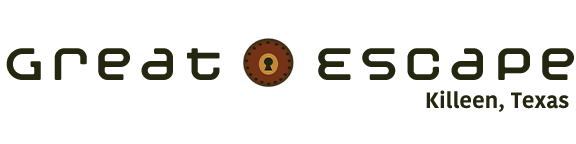
<style>
.page{position:relative;width:576px;height:144px;background:#ffffff}
.page>*{position:absolute;margin:0}
.t1{font:48px "Moby-Monospace";color:#24260f}
.t2{font:22px "KohinoorBangla-Bold";color:#24260f}
</style>
<div class="page">
<p class="t1" style="left:6px;top:48px;width:568px;height:32px">Great  Escape</p>
<p class="t2" style="left:426px;top:90px;width:143px;height:22px">Killeen, Texas</p>
</div>
